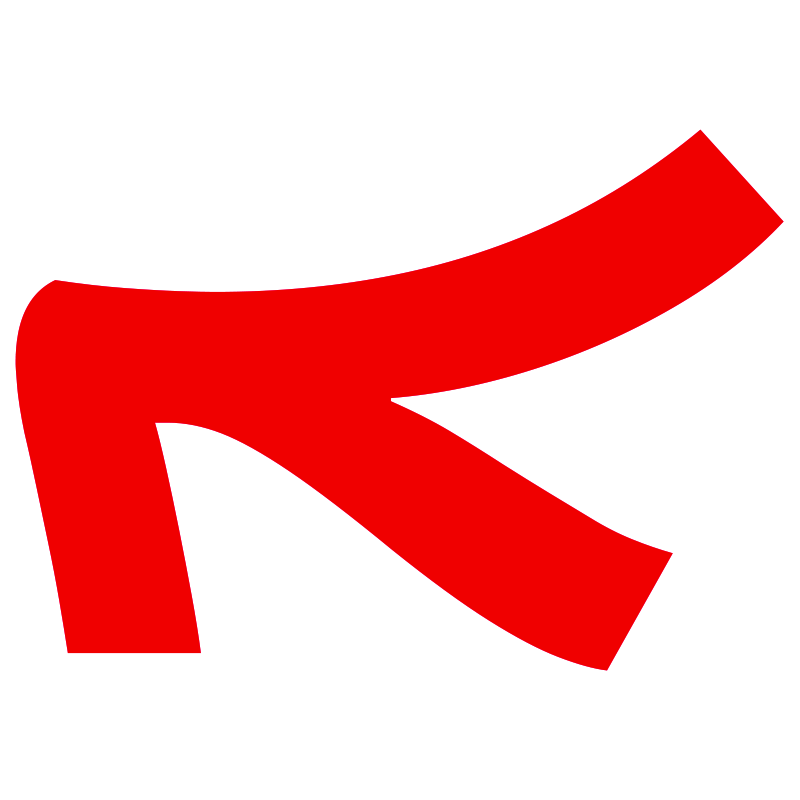
<style>
.page{position:relative;width:800px;height:800px;background:#ffffff}
.page>*{position:absolute;margin:0}
.t1{font:791.7px "NotoSansSyriac-Black";letter-spacing:0.075em;color:#f00000}
</style>
<div class="page">
<p class="t1" style="left:15px;top:129px;width:769px;height:542px">ܐ</p>
<p class="t1" style="left:15px;top:129px;width:769px;height:542px">ܐ</p>
</div>
